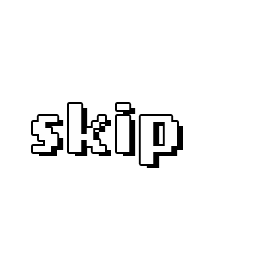
<style>
.page{position:relative;width:256px;height:256px;background:#ffffff}
.page>*{position:absolute;margin:0}
.t1{font:72px "LoRes12OT-Bold";color:#fefefe}
.t2{font:72px "LoRes12OT-Bold"}
</style>
<div class="page">
<p class="t1" style="left:33px;top:104px;width:144px;height:60px">skip</p>
<p class="t2" style="left:39px;top:108px;width:144px;height:60px">skip</p>
</div>
